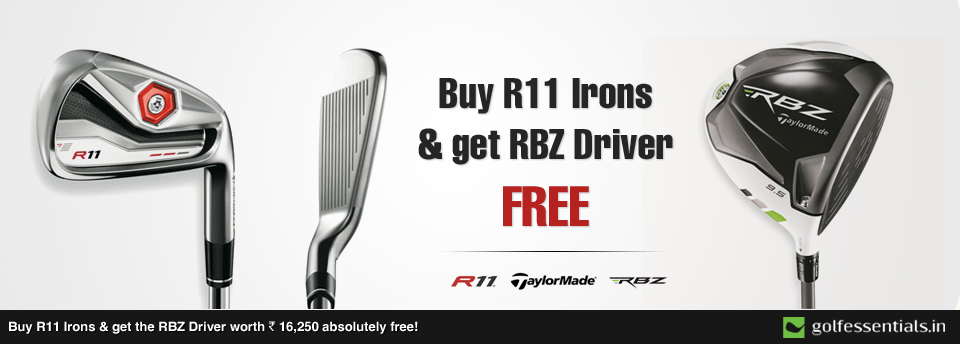
<style>
.page{position:relative;width:960px;height:344px}
.page>*{position:absolute;margin:0}
.t1{font:42px "HelveticaLT-Compressed";color:#252525}
.t2{font:56px "HelveticaLT-Compressed";color:#b62220}
.t3{font:13px "HelveticaCE-Bold";color:#ffffff}
.t4{font:13px "RupeeForadian";color:#ffffff}
</style>
<div class="page">
<p class="t1" style="left:418px;top:78px;width:255px;height:148px;text-align:center">Buy R11 Irons<br>&amp; get RBZ Driver<br><span class="t2">FREE</span></p>
<p class="t3" style="left:9px;top:321px;width:409px;height:13px">Buy R11 Irons &amp; get the RBZ Driver worth <span class="t4">`</span> 16,250 absolutely free!</p>
</div>
